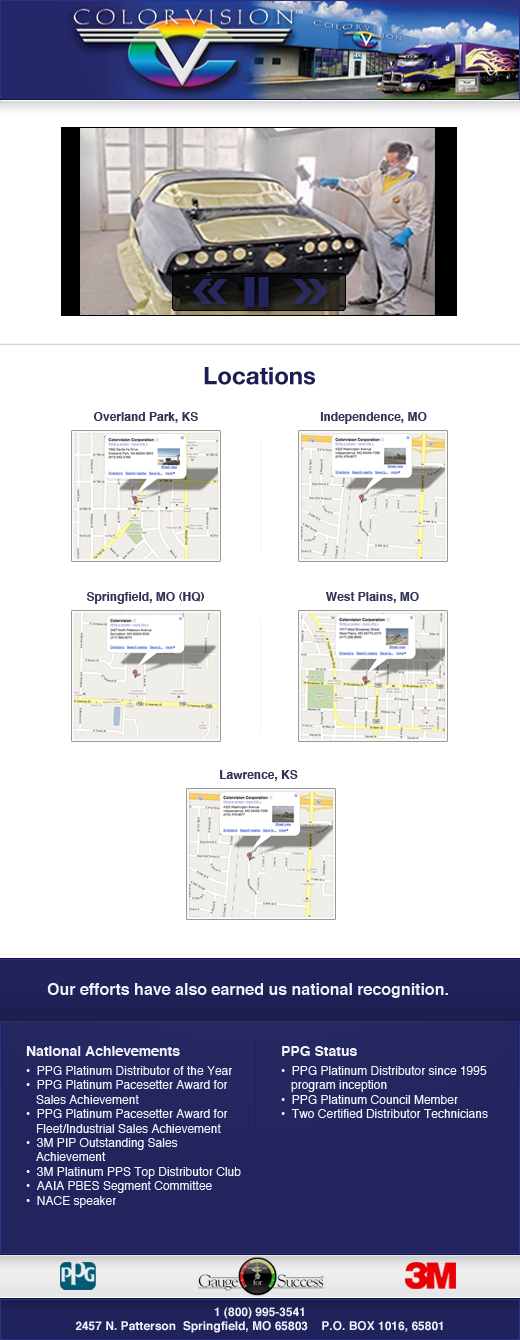
<style>
.page{position:relative;width:520px;height:1340px;background:#ffffff}
.page>*{position:absolute;margin:0}
.t1{font:24px "HelveticaNeue-Bold";color:#1d1f52}
.t2{font:12px "Helvetica-Bold";color:#323457}
.t3{font:16px "Helvetica-Bold";color:#f2f2fa}
.t4{font:12px "Helvetica";color:#f2f2fa}
.t5{font:14px "Helvetica-Bold";color:#f2f2fa}
.t6{font:12px "Helvetica-Bold";color:#f2f2fa}
</style>
<div class="page">
<p class="t1" style="left:204px;top:367px;width:111px;height:18px">Locations</p>
<p class="t2" style="left:93px;top:412px;width:105px;height:11px">Overland Park, KS</p>
<p class="t2" style="left:320px;top:412px;width:107px;height:12px">Independence, MO</p>
<p class="t2" style="left:87px;top:592px;width:117px;height:12px">Springfield, MO (HQ)</p>
<p class="t2" style="left:326px;top:592px;width:93px;height:11px">West Plains, MO</p>
<p class="t2" style="left:220px;top:770px;width:78px;height:11px">Lawrence, KS</p>
<p class="t3" style="left:47px;top:983px;width:401px;height:15px">Our efforts have also earned us national recognition.</p>
<p class="t4" style="left:26px;top:1046px;width:215px;height:162px"><span class="t5">National Achievements<br></span>•  PPG Platinum Distributor of the Year<br>•  PPG Platinum Pacesetter Award for     <br>   Sales Achievement<br>•  PPG Platinum Pacesetter Award for <br>   Fleet/Industrial Sales Achievement<br>•  3M PIP Outstanding Sales <br>   Achievement<br>•  3M Platinum PPS Top Distributor Club<br>•  AAIA PBES Segment Committee<br>•  NACE speaker</p>
<p class="t4" style="left:281px;top:1046px;width:207px;height:72px"><span class="t5">PPG Status<br></span>•  PPG Platinum Distributor since 1995<br>   program inception<br>•  PPG Platinum Council Member<br>•  Two Certified Distributor Technicians</p>
<p class="t6" style="left:75px;top:1307px;width:368px;height:26px;text-align:center">1 (800) 995-3541<br>2457 N. Patterson  Springfield, MO 65803    P.O. BOX 1016, 65801</p>
</div>
